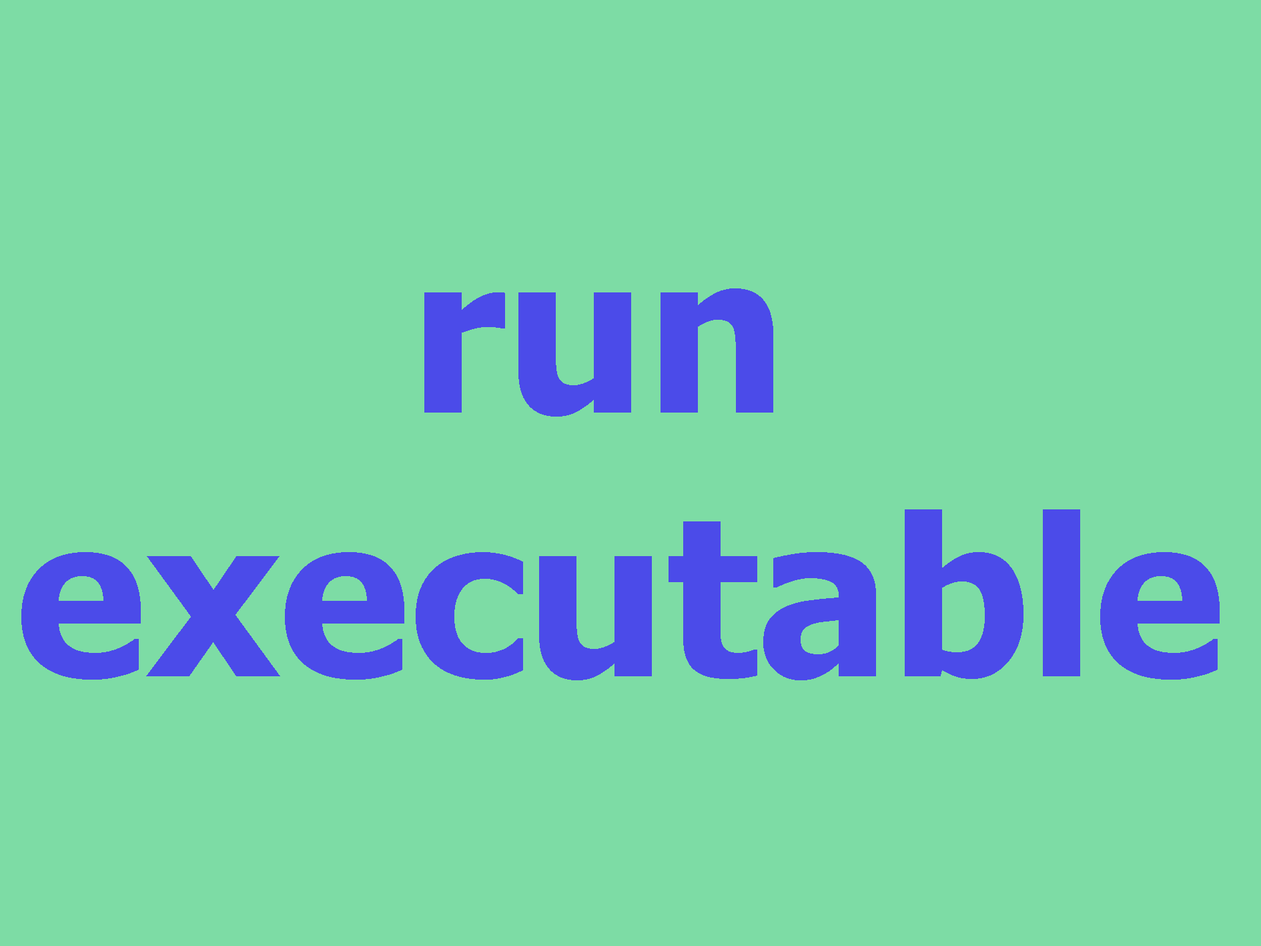
<style>
.page{position:relative;width:1261px;height:946px;background:#7ddca5}
.page>*{position:absolute;margin:0}
.t1{font:219.8px "Tahoma-Bold";color:#4b4be9}
</style>
<div class="page">
<p class="t1" style="left:21px;top:288px;width:1199px;height:392px;text-align:center">run <br>executable</p>
</div>
